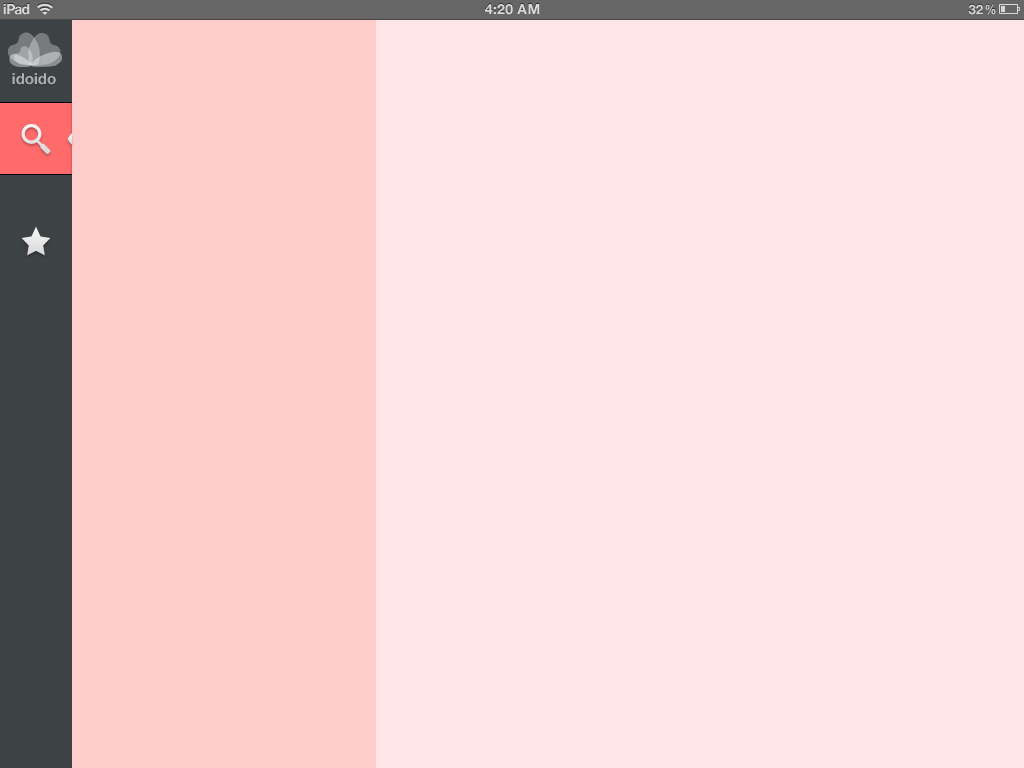
<style>
.page{position:relative;width:1024px;height:768px;background:#ffe5e5}
.page>*{position:absolute;margin:0}
.t1{font:14px "HelveticaNeue-Bold";letter-spacing:-0.06em;color:#d9d9d9}
.t2{font:14px "HelveticaNeue-Bold";color:#d9d9d9;text-transform:uppercase}
.t3{font:13px "HelveticaNeue-Bold";color:#d9d9d9;text-transform:uppercase}
.t4{font:13px "HelveticaNeue-Bold";color:#d9d9d9;text-transform:uppercase;scale:0.89 1}
.t5{font:15px "HelveticaNeue-Bold";color:#acaeaf}
</style>
<div class="page">
<p class="t1" style="left:3px;top:4px;width:27px;height:11px">iPad</p>
<p class="t2" style="left:485px;top:4px;width:55px;height:11px">4:20 AM</p>
<p class="t3" style="left:968px;top:4px;width:28px;height:11px">32<span class="t4">%</span></p>
<p class="t5" style="left:12px;top:73px;width:44px;height:12px">idoido</p>
</div>
